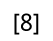
<style>
.page{position:relative;width:53px;height:41px;background:#ffffff}
.page>*{position:absolute;margin:0}
.t1{font:23.7px "DroidSans";color:#000000}
</style>
<div class="page">
<p class="t1" style="left:14px;top:13px;width:25px;height:22px">[8]</p>
</div>
